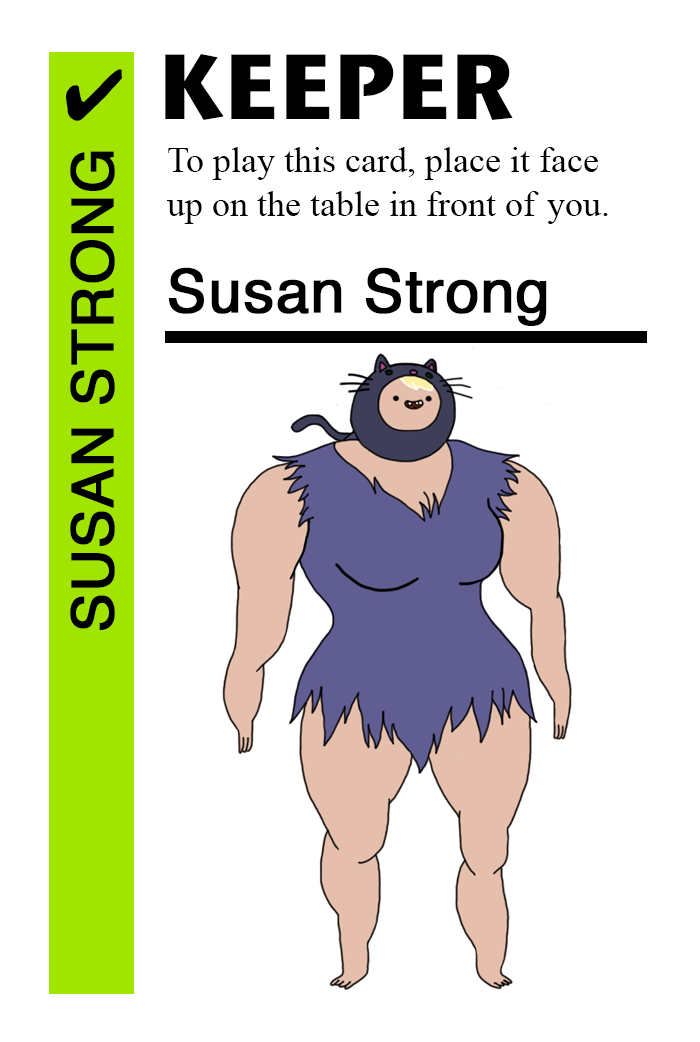
<style>
.page{position:relative;width:700px;height:1042px;background:#ffffff}
.page>*{position:absolute;margin:0}
.t1{font:92px "StoneSansITC-Bold";color:#000000}
.t2{font:72px "MS-Gothic";color:#000000}
.t3{font:36px "TimesNewRomanPSMT";color:#000000}
.t4{font:58px "Helvetica";color:#000000;font-weight:bold}
.t5{font:60px "Helvetica";color:#000000;font-weight:bold}
</style>
<div class="page">
<p class="t1" style="left:165px;top:54px;width:348px;height:66px">KEEPER</p>
<p class="t2" style="left:66px;top:69px;width:56px;height:52px">✔</p>
<p class="t3" style="left:167px;top:147px;width:441px;height:77px">To play this card, place it face<br>up on the table in front of you.</p>
<p class="t4" style="left:70px;top:151px;width:45px;height:479px;rotate:-90deg">SUSAN STRONG</p>
<p class="t5" style="left:169px;top:267px;width:378px;height:59px">Susan Strong</p>
</div>
